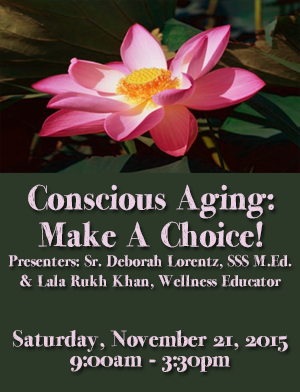
<style>
.page{position:relative;width:300px;height:392px;background:#2c3929}
.page>*{position:absolute;margin:0}
.t1{font:16px/20px "MomsDiner";color:#ead0e2}
.t2{font:35px/37px "MomsDiner";color:#ead0e2}
.t3{font:23px/20px "MomsDiner";color:#ead0e2}
</style>
<div class="page">
<p class="t1" style="left:8px;top:184px;width:284px;height:188px;text-align:center"><span class="t2">Conscious Aging: <br>Make A Choice!<br></span>Presenters: Sr. Deborah Lorentz, SSS M.Ed. &amp; Lala Rukh Khan, Wellness Educator<br><br><br><span class="t3">Saturday, November 21, 2015<br>9:00am - 3:30pm</span></p>
</div>
